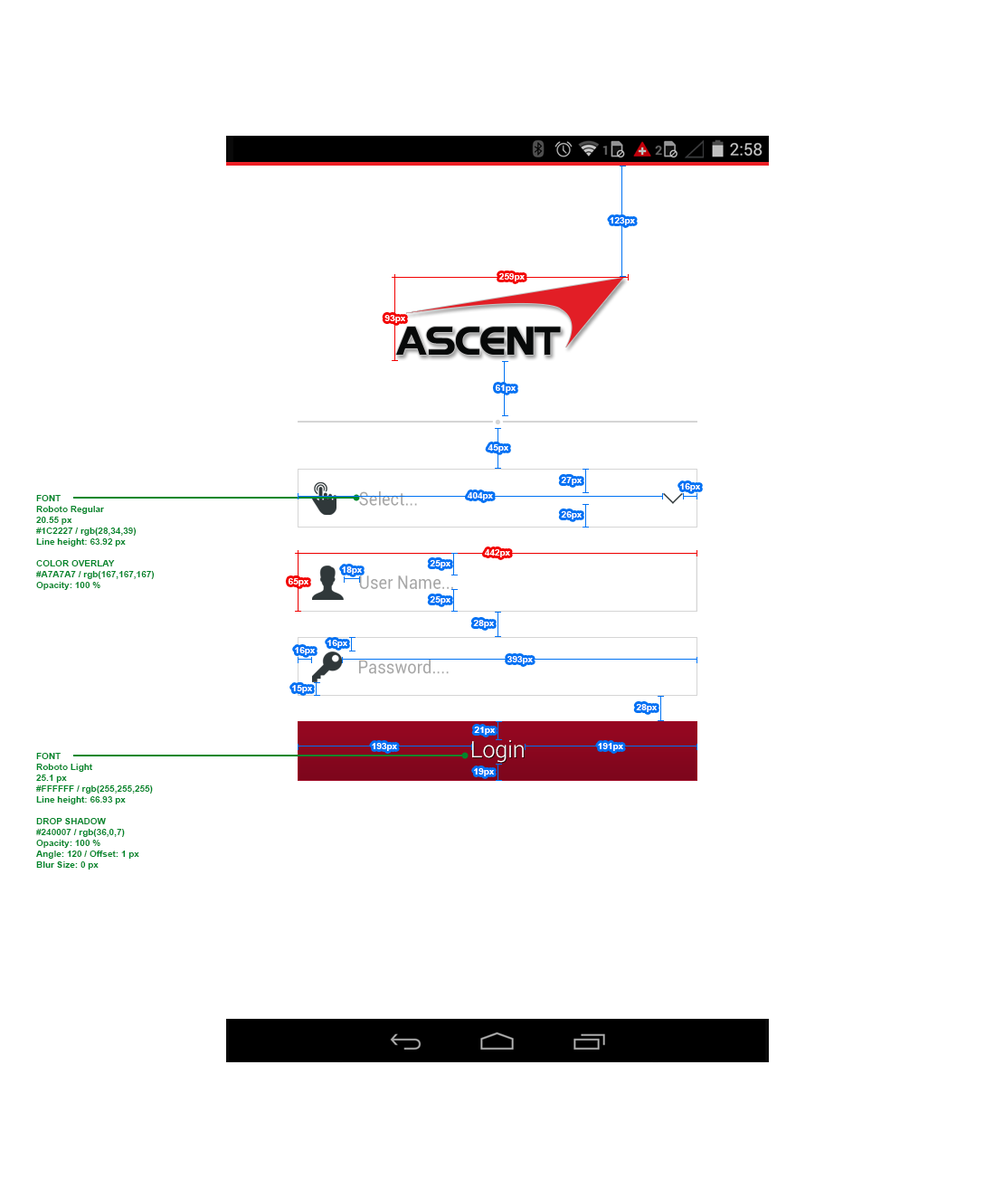
<style>
.page{position:relative;width:995px;height:1198px;background:#ffffff}
.page>*{position:absolute;margin:0}
.t1{font:9px "Arial-BoldMT";color:#ffffff}
.t2{font:9px "Arial-BoldMT";color:#00872b}
.t3{font:18.6px "Roboto-Regular";color:#a7a7a7;scale:0.89 1}
.t4{font:22.7px "Roboto-Light";color:#ffffff}
</style>
<div class="page">
<p class="t1" style="left:610px;top:217px;width:25px;height:8px">123px</p>
<p class="t1" style="left:499px;top:273px;width:26px;height:8px">259px</p>
<p class="t1" style="left:385px;top:315px;width:20px;height:8px">93px</p>
<p class="t1" style="left:495px;top:385px;width:21px;height:8px">61px</p>
<p class="t1" style="left:488px;top:444px;width:21px;height:8px">45px</p>
<p class="t1" style="left:561px;top:477px;width:21px;height:8px">27px</p>
<p class="t1" style="left:680px;top:483px;width:20px;height:8px">16px</p>
<p class="t2" style="left:36px;top:495px;width:119px;height:95px">FONT <br>Roboto Regular<br>20.55 px<br>#1C2227 / rgb(28,34,39)<br>Line height: 63.92 px<br><br>COLOR OVERLAY<br>#A7A7A7 / rgb(167,167,167)<br>Opacity: 100 %</p>
<p class="t3" style="left:359px;top:491px;width:58px;height:15px">Select...</p>
<p class="t1" style="left:467px;top:492px;width:26px;height:8px">404px</p>
<p class="t1" style="left:561px;top:511px;width:21px;height:8px">26px</p>
<p class="t1" style="left:484px;top:549px;width:26px;height:8px">442px</p>
<p class="t1" style="left:342px;top:566px;width:20px;height:9px">18px</p>
<p class="t1" style="left:430px;top:560px;width:21px;height:8px">25px</p>
<p class="t1" style="left:288px;top:578px;width:21px;height:8px">65px</p>
<p class="t3" style="left:359px;top:575px;width:94px;height:14px">User Name...</p>
<p class="t1" style="left:430px;top:596px;width:21px;height:8px">25px</p>
<p class="t1" style="left:473px;top:620px;width:21px;height:8px">28px</p>
<p class="t1" style="left:328px;top:640px;width:19px;height:8px">16px</p>
<p class="t1" style="left:295px;top:647px;width:20px;height:8px">16px</p>
<p class="t3" style="left:359px;top:659px;width:90px;height:15px">Password....</p>
<p class="t1" style="left:508px;top:656px;width:25px;height:8px">393px</p>
<p class="t1" style="left:292px;top:685px;width:20px;height:8px">15px</p>
<p class="t1" style="left:636px;top:704px;width:21px;height:8px">28px</p>
<p class="t1" style="left:474px;top:727px;width:21px;height:8px">21px</p>
<p class="t1" style="left:372px;top:743px;width:25px;height:8px">193px</p>
<p class="t4" style="left:472px;top:740px;width:52px;height:23px">Login</p>
<p class="t1" style="left:598px;top:743px;width:25px;height:8px">191px</p>
<p class="t2" style="left:36px;top:753px;width:117px;height:117px">FONT <br>Roboto Light<br>25.1 px<br>#FFFFFF / rgb(255,255,255)<br>Line height: 66.93 px<br><br>DROP SHADOW<br>#240007 / rgb(36,0,7)<br>Opacity: 100 %<br>Angle: 120 / Offset: 1 px<br>Blur Size: 0 px</p>
<p class="t1" style="left:474px;top:768px;width:20px;height:8px">19px</p>
</div>
